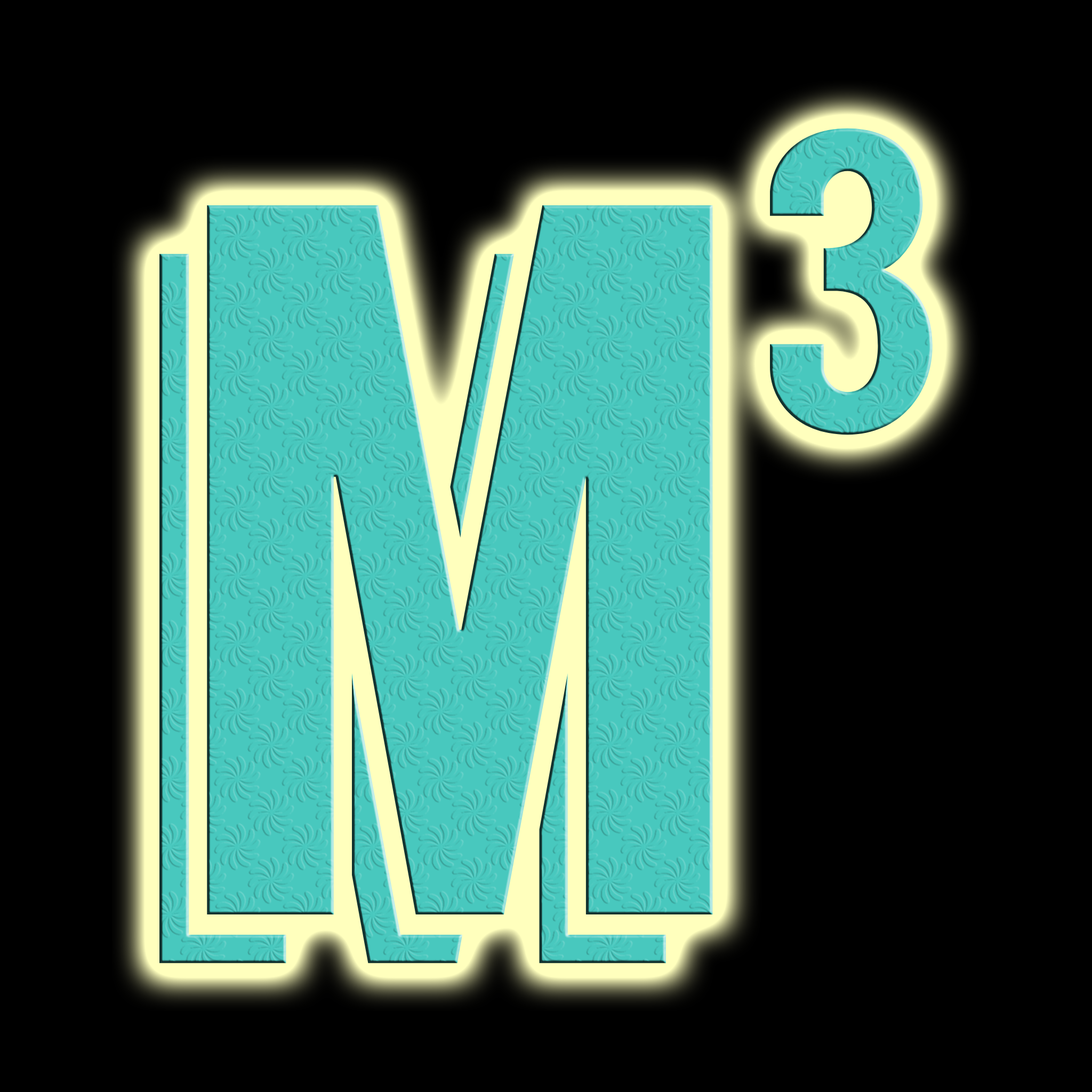
<style>
.page{position:relative;width:1092px;height:1092px;background:#000000}
.page>*{position:absolute;margin:0}
.t1{font:426.6px "Langdon";color:#48c8be}
.t2{font:1013.1px "Langdon";color:#48c8be}
</style>
<div class="page">
<p class="t1" style="left:770px;top:128px;width:163px;height:307px">3</p>
<p class="t2" style="left:159px;top:205px;width:554px;height:758px">m</p>
</div>
